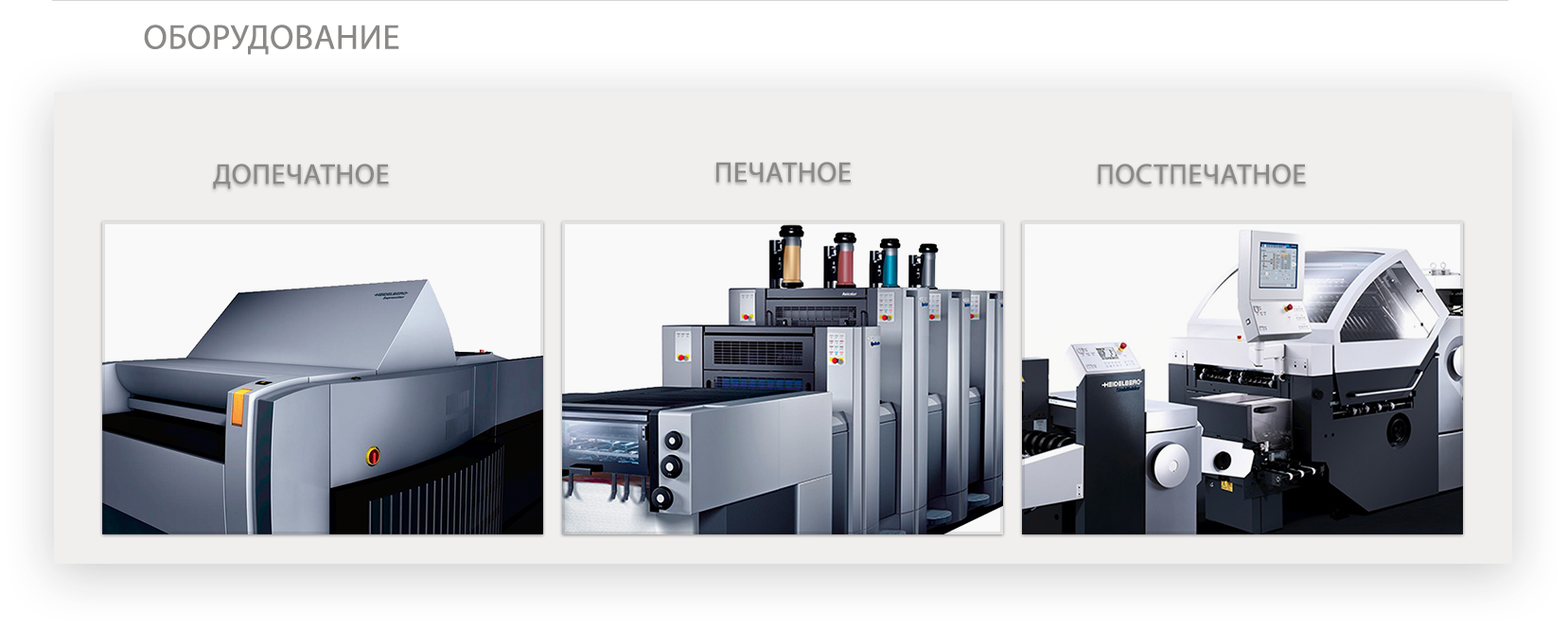
<style>
.page{position:relative;width:1568px;height:629px;background:#f0efed}
.page>*{position:absolute;margin:0}
.t1{font:34.7px "MyriadPro-Regular";letter-spacing:0.02em;color:#8b8987}
.t2{font:28.9px "MyriadPro-Regular";letter-spacing:0.02em;color:#8b8987}
</style>
<div class="page">
<p class="t1" style="left:144px;top:25px;width:255px;height:30px">ОБОРУДОВАНИЕ</p>
<p class="t2" style="left:716px;top:162px;width:135px;height:21px">ПЕЧАТНОЕ</p>
<p class="t2" style="left:213px;top:164px;width:176px;height:25px">ДОПЕЧАТНОЕ</p>
<p class="t2" style="left:1098px;top:164px;width:208px;height:21px">ПОСТПЕЧАТНОЕ</p>
</div>
